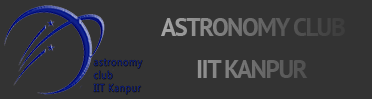
<style>
.page{position:relative;width:372px;height:99px;background:#333333}
.page>*{position:absolute;margin:0}
.t1{font:25px "PTSans-Bold";letter-spacing:-0.06em}
</style>
<div class="page">
<p class="t1" style="left:161px;top:18px;width:184px;height:18px">ASTRONOMY CLUB</p>
<p class="t1" style="left:197px;top:60px;width:111px;height:18px">IIT KANPUR</p>
</div>
